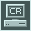
<style>
.page{position:relative;width:31px;height:31px;background:#435655}
.page>*{position:absolute;margin:0}
.t1{font:8px "rktr7rg";color:#d0e9e7}
</style>
<div class="page">
<p class="t1" style="left:10px;top:8px;width:11px;height:6px">CR</p>
</div>
